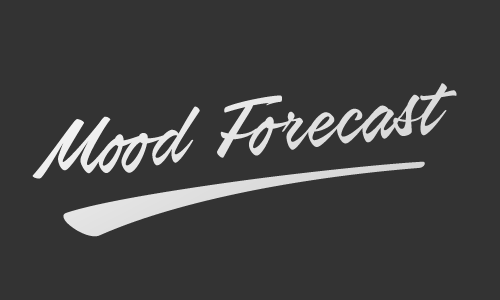
<style>
.page{position:relative;width:500px;height:300px;background:#333333}
.page>*{position:absolute;margin:0}
.t1{font:75px "AirwaysPERSONALUSEONLY";letter-spacing:0.01em;color:#e1e1e1}
.t2{font:166.7px "AirwaysPERSONALUSEONLY";letter-spacing:0.01em;color:#e1e1e1}
</style>
<div class="page">
<p class="t1" style="left:32px;top:83px;width:425px;height:154px;rotate:-7deg"><span class="t2">_</span>Mood Forecast</p>
</div>
